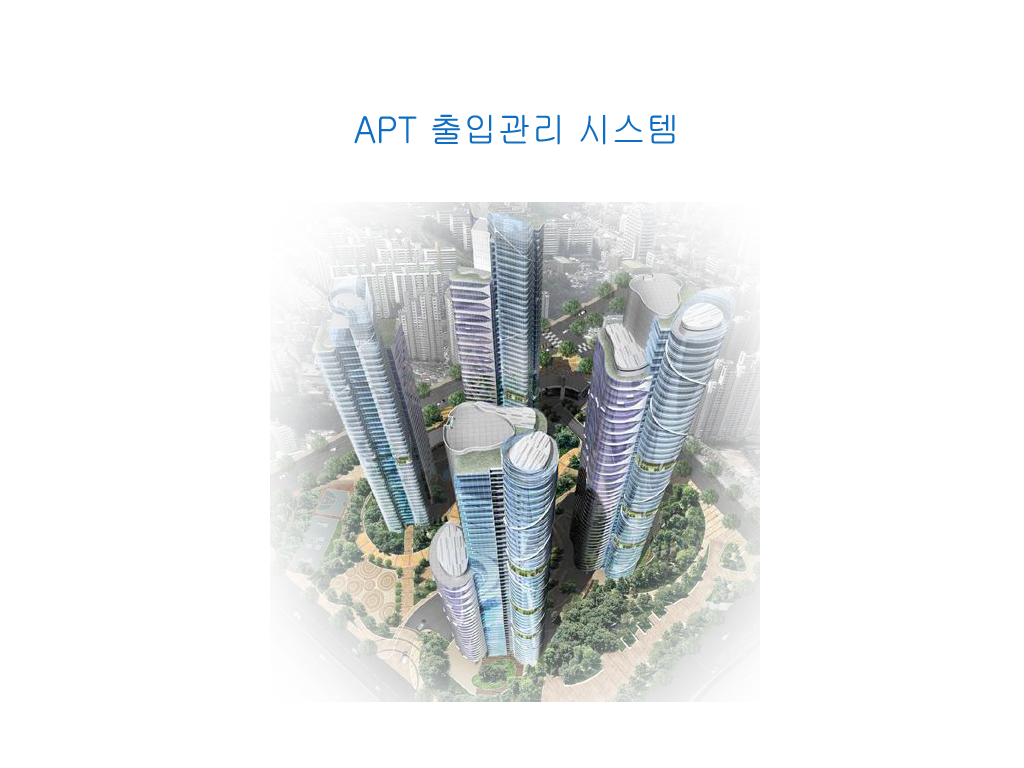
<style>
.page{position:relative;width:1024px;height:768px;background:#ffffff}
.page>*{position:absolute;margin:0}
.t1{font:36px "Gulim";color:#106fc2;scale:0.95 1}
</style>
<div class="page">
<p class="t1" style="left:354px;top:114px;width:321px;height:31px">APT 출입관리 시스템</p>
</div>
